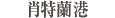
<style>
.page{position:relative;width:115px;height:18px;background:#ffffff}
.page>*{position:absolute;margin:0}
.t1{font:18px "RyuminPr6N-ExBold";color:#4c4843;scale:0.9 1}
</style>
<div class="page">
<p class="t1" style="left:28px;top:0px;width:61px;height:18px">肖特蘭港</p>
</div>
